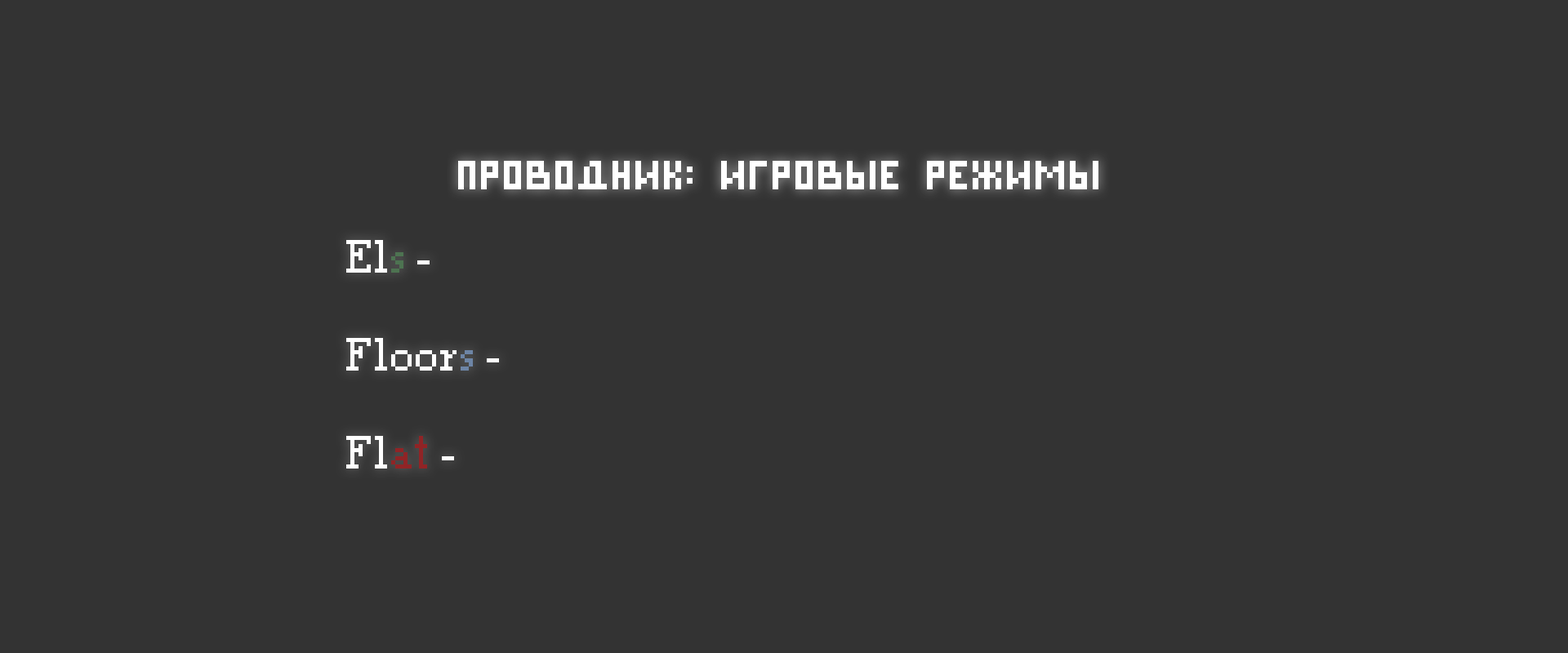
<style>
.page{position:relative;width:1568px;height:653px;background:#333333}
.page>*{position:absolute;margin:0}
.t1{font:40.8px "PixelCyr-Normal";color:#ffffff}
.t2{font:40.8px "PixelTimes";color:#ffffff}
.t3{font:40.8px "PixelTimes";color:#4d7351}
.t4{font:40.8px "PixelTimes";color:#6d85a6}
.t5{font:40.8px "PixelTimes";color:#902426}
</style>
<div class="page">
<p class="t1" style="left:458px;top:161px;width:640px;height:28px">Проводник: Игровые режимы</p>
<p class="t2" style="left:346px;top:240px;width:153px;height:229px">El<span class="t3">s </span>-<br><br>Floor<span class="t4">s</span> -<br><br>Fl<span class="t5">at</span> -</p>
</div>
